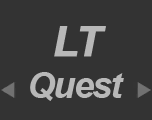
<style>
.page{position:relative;width:152px;height:120px;background:#333333}
.page>*{position:absolute;margin:0}
.t1{font:42.3px "Arial-BoldMT";letter-spacing:-0.1em;color:#b8b8b8;font-weight:bold;font-style:italic}
.t2{font:36px "Arial-BoldItalicMT";letter-spacing:-0.05em;color:#b8b8b8}
</style>
<div class="page">
<p class="t1" style="left:54px;top:26px;width:52px;height:31px">LT</p>
<p class="t2" style="left:30px;top:72px;width:94px;height:29px">Quest</p>
</div>
